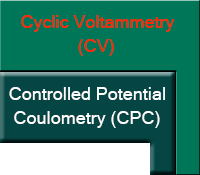
<style>
.page{position:relative;width:200px;height:175px;background:#007658}
.page>*{position:absolute;margin:0}
.t1{font:18px/12px "MicrosoftSansSerif";color:#fc2805}
.t2{font:18px/24px "MicrosoftSansSerif";color:#fffefe}
</style>
<div class="page">
<p class="t1" style="left:21px;top:15px;width:154px;height:41px;text-align:right">Cyclic Voltammetry<br> <br>(CV)</p>
<p class="t2" style="left:9px;top:87px;width:156px;height:41px;text-align:right">Controlled Potential <br>  Coulometry (CPC)</p>
</div>
